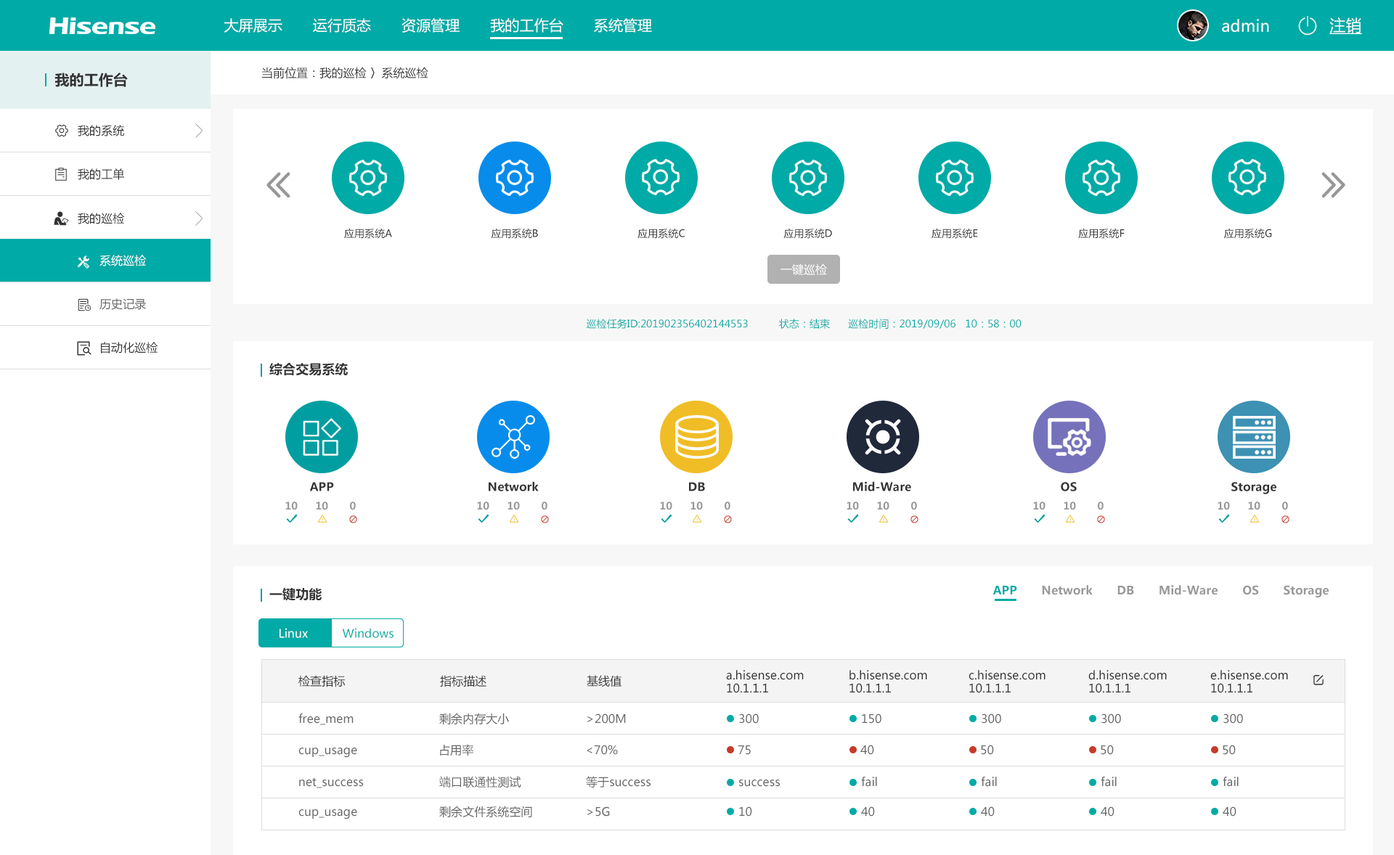
<style>
.page{position:relative;width:1394px;height:855px;background:#ffffff}
.page>*{position:absolute;margin:0}
.t1{font:16px "MicrosoftYaHei";letter-spacing:0.004em;color:#ffffff;text-decoration:underline}
.t2{font:14.5px "MicrosoftYaHei";letter-spacing:0.004em;color:#ffffff}
.t3{font:16px "MicrosoftYaHei";letter-spacing:0.004em;color:#ffffff}
.t4{font:14.5px "MicrosoftYaHei-Bold";letter-spacing:0.004em;color:#333333}
.t5{font:11.6px "MicrosoftYaHei";letter-spacing:0.004em;color:#333333}
.t6{font:10.2px "MicrosoftYaHei";letter-spacing:0.004em;color:#333333}
.t7{font:11.6px "MicrosoftYaHei";letter-spacing:0.004em;color:#ffffff}
.t8{font:11.6px "MicrosoftYaHei";letter-spacing:0.004em;color:#666666}
.t9{font:10.2px "MicrosoftYaHei";letter-spacing:0.004em;color:#00aaa6}
.t10{font:13.1px "MicrosoftYaHei-Bold";letter-spacing:0.004em;color:#333333}
.t11{font:11.6px "MicrosoftYaHei-Bold";letter-spacing:0.004em;color:#333333}
.t12{font:10.2px "MicrosoftYaHei-Bold";letter-spacing:0.004em;color:#999999}
.t13{font:11.6px "MicrosoftYaHei-Bold";letter-spacing:0.004em;color:#999999}
.t14{font:11.6px "MicrosoftYaHei-Bold";letter-spacing:0.004em;color:#00aaa6}
.t15{font:11.6px "MicrosoftYaHei";letter-spacing:0.004em;color:#00aaa6}
.t16{font:11.6px/13.1px "MicrosoftYaHei";letter-spacing:0.004em;color:#333333}
</style>
<div class="page">
<p class="t1" style="left:1329px;top:17px;width:33px;height:17px">注销</p>
<p class="t2" style="left:224px;top:18px;width:428px;height:15px">大屏展示       运行质态       资源管理       我的工作台       系统管理</p>
<p class="t3" style="left:1222px;top:19px;width:47px;height:13px">admin</p>
<p class="t4" style="left:54px;top:73px;width:74px;height:14px">我的工作台</p>
<p class="t5" style="left:261px;top:67px;width:167px;height:12px">当前位置：我的巡检 〉系统巡检</p>
<p class="t5" style="left:78px;top:125px;width:46px;height:12px">我的系统</p>
<p class="t5" style="left:78px;top:168px;width:46px;height:12px">我的工单</p>
<p class="t5" style="left:78px;top:213px;width:47px;height:11px">我的巡检</p>
<p class="t6" style="left:344px;top:228px;width:48px;height:11px">应用系统A</p>
<p class="t6" style="left:491px;top:228px;width:47px;height:11px">应用系统B</p>
<p class="t6" style="left:638px;top:228px;width:47px;height:11px">应用系统C</p>
<p class="t6" style="left:783px;top:228px;width:49px;height:11px">应用系统D</p>
<p class="t6" style="left:932px;top:228px;width:46px;height:11px">应用系统E</p>
<p class="t6" style="left:1078px;top:228px;width:47px;height:11px">应用系统F</p>
<p class="t6" style="left:1223px;top:228px;width:49px;height:11px">应用系统G</p>
<p class="t7" style="left:99px;top:255px;width:48px;height:11px">系统巡检</p>
<p class="t7" style="left:781px;top:264px;width:46px;height:11px">一键巡检</p>
<p class="t8" style="left:99px;top:298px;width:47px;height:12px">历史记录</p>
<p class="t9" style="left:586px;top:319px;width:436px;height:10px">巡检任务ID:201902356402144553          状态：结束      巡检时间：2019/09/06   10：58：00</p>
<p class="t5" style="left:101px;top:342px;width:57px;height:12px">自动化巡检</p>
<p class="t10" style="left:269px;top:363px;width:79px;height:13px">综合交易系统</p>
<p class="t11" style="left:309px;top:482px;width:25px;height:10px">APP</p>
<p class="t11" style="left:489px;top:481px;width:50px;height:11px">Network</p>
<p class="t11" style="left:689px;top:482px;width:16px;height:10px">DB</p>
<p class="t11" style="left:853px;top:481px;width:58px;height:11px">Mid-Ware</p>
<p class="t11" style="left:1061px;top:482px;width:16px;height:10px">OS</p>
<p class="t11" style="left:1231px;top:482px;width:45px;height:12px">Storage</p>
<p class="t12" style="left:285px;top:502px;width:13px;height:8px">10</p>
<p class="t12" style="left:316px;top:502px;width:12px;height:8px">10</p>
<p class="t12" style="left:350px;top:502px;width:6px;height:8px">0</p>
<p class="t12" style="left:477px;top:502px;width:12px;height:8px">10</p>
<p class="t12" style="left:508px;top:502px;width:12px;height:8px">10</p>
<p class="t12" style="left:542px;top:502px;width:5px;height:8px">0</p>
<p class="t12" style="left:660px;top:502px;width:12px;height:8px">10</p>
<p class="t12" style="left:691px;top:502px;width:12px;height:8px">10</p>
<p class="t12" style="left:725px;top:502px;width:5px;height:8px">0</p>
<p class="t12" style="left:847px;top:502px;width:12px;height:8px">10</p>
<p class="t12" style="left:877px;top:502px;width:12px;height:8px">10</p>
<p class="t12" style="left:911px;top:502px;width:6px;height:8px">0</p>
<p class="t12" style="left:1033px;top:502px;width:13px;height:8px">10</p>
<p class="t12" style="left:1064px;top:502px;width:12px;height:8px">10</p>
<p class="t12" style="left:1098px;top:502px;width:6px;height:8px">0</p>
<p class="t12" style="left:1218px;top:502px;width:12px;height:8px">10</p>
<p class="t12" style="left:1248px;top:502px;width:13px;height:8px">10</p>
<p class="t12" style="left:1282px;top:502px;width:6px;height:8px">0</p>
<p class="t10" style="left:269px;top:587px;width:53px;height:14px">一键功能</p>
<p class="t13" style="left:993px;top:585px;width:336px;height:13px"><span class="t14">APP       </span>Network       DB       Mid-Ware       OS       Storage</p>
<p class="t7" style="left:280px;top:628px;width:28px;height:10px">Linux</p>
<p class="t15" style="left:342px;top:628px;width:52px;height:10px">Windows</p>
<p class="t5" style="left:298px;top:675px;width:48px;height:13px">检查指标</p>
<p class="t5" style="left:440px;top:675px;width:46px;height:13px">指标描述</p>
<p class="t5" style="left:587px;top:675px;width:35px;height:12px">基线值</p>
<p class="t16" style="left:726px;top:670px;width:78px;height:23px">a.hisense.com<br>10.1.1.1</p>
<p class="t16" style="left:850px;top:670px;width:77px;height:23px">b.hisense.com<br>10.1.1.1</p>
<p class="t16" style="left:969px;top:670px;width:77px;height:23px">c.hisense.com<br>10.1.1.1</p>
<p class="t16" style="left:1088px;top:670px;width:79px;height:23px">d.hisense.com<br>10.1.1.1</p>
<p class="t16" style="left:1210px;top:670px;width:78px;height:23px">e.hisense.com<br>10.1.1.1</p>
<p class="t8" style="left:298px;top:714px;width:56px;height:11px">free_mem</p>
<p class="t8" style="left:439px;top:713px;width:70px;height:12px">剩余内存大小</p>
<p class="t8" style="left:587px;top:714px;width:39px;height:10px">&gt;200M</p>
<p class="t8" style="left:739px;top:714px;width:20px;height:10px">300</p>
<p class="t8" style="left:862px;top:714px;width:19px;height:10px">150</p>
<p class="t8" style="left:982px;top:714px;width:19px;height:10px">300</p>
<p class="t8" style="left:1101px;top:714px;width:20px;height:10px">300</p>
<p class="t8" style="left:1223px;top:714px;width:20px;height:10px">300</p>
<p class="t8" style="left:298px;top:748px;width:59px;height:10px">cup_usage</p>
<p class="t8" style="left:440px;top:744px;width:33px;height:13px">占用率</p>
<p class="t8" style="left:587px;top:745px;width:31px;height:10px">&lt;70%</p>
<p class="t8" style="left:738px;top:746px;width:13px;height:9px">75</p>
<p class="t8" style="left:860px;top:745px;width:14px;height:10px">40</p>
<p class="t8" style="left:981px;top:745px;width:13px;height:10px">50</p>
<p class="t8" style="left:1101px;top:745px;width:13px;height:10px">50</p>
<p class="t8" style="left:1223px;top:745px;width:13px;height:10px">50</p>
<p class="t8" style="left:299px;top:778px;width:65px;height:11px">net_success</p>
<p class="t8" style="left:439px;top:776px;width:82px;height:13px">端口联通性测试</p>
<p class="t8" style="left:586px;top:776px;width:65px;height:12px">等于success</p>
<p class="t8" style="left:739px;top:780px;width:41px;height:7px">success</p>
<p class="t8" style="left:861px;top:777px;width:16px;height:10px">fail</p>
<p class="t8" style="left:981px;top:777px;width:16px;height:10px">fail</p>
<p class="t8" style="left:1101px;top:777px;width:16px;height:10px">fail</p>
<p class="t8" style="left:1223px;top:777px;width:16px;height:10px">fail</p>
<p class="t8" style="left:298px;top:810px;width:59px;height:10px">cup_usage</p>
<p class="t8" style="left:439px;top:806px;width:93px;height:12px">剩余文件系统空间</p>
<p class="t8" style="left:587px;top:807px;width:23px;height:10px">&gt;5G</p>
<p class="t8" style="left:739px;top:807px;width:13px;height:10px">10</p>
<p class="t8" style="left:861px;top:807px;width:14px;height:10px">40</p>
<p class="t8" style="left:981px;top:807px;width:14px;height:10px">40</p>
<p class="t8" style="left:1101px;top:807px;width:14px;height:10px">40</p>
<p class="t8" style="left:1223px;top:807px;width:14px;height:10px">40</p>
</div>
